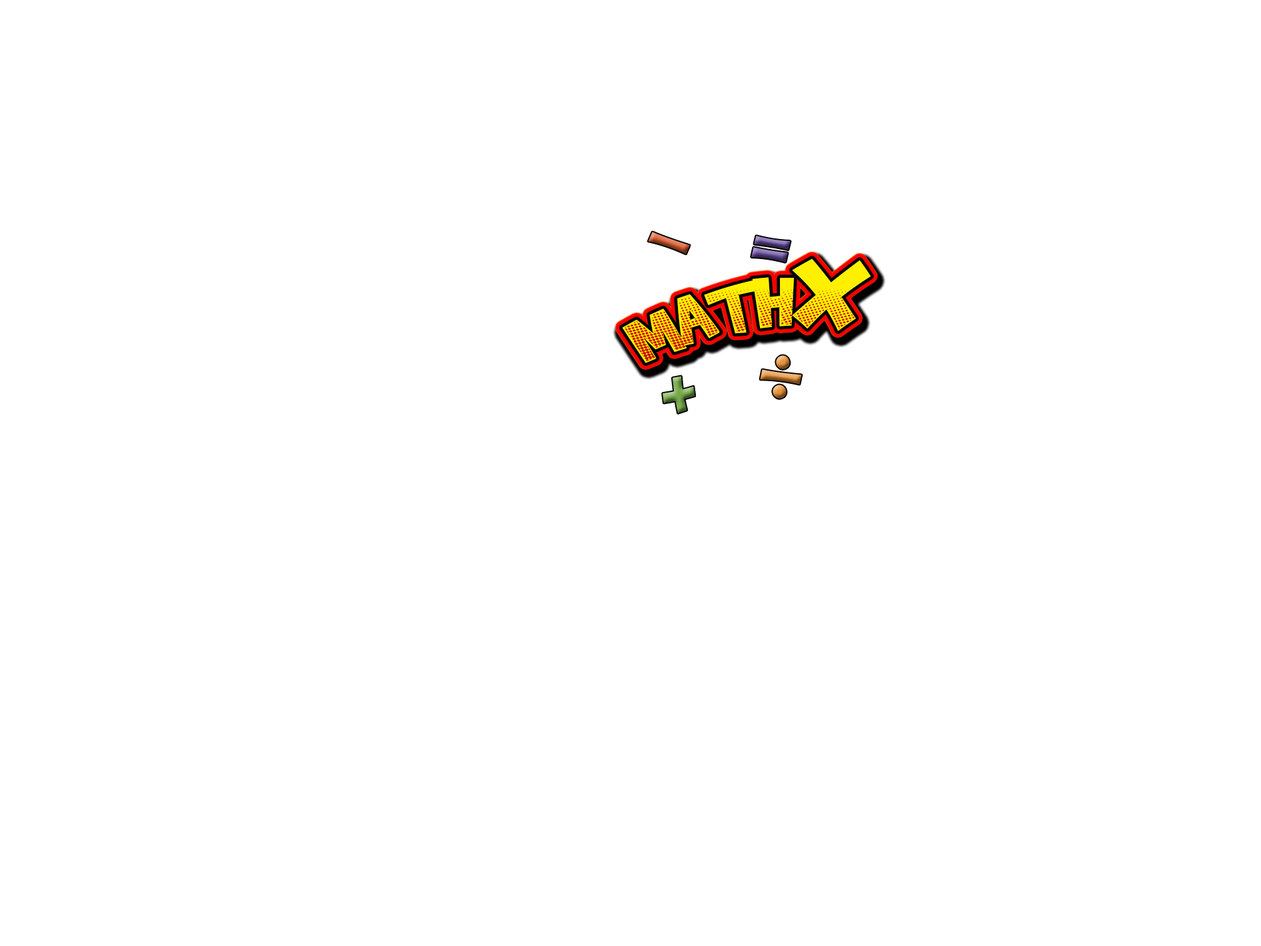
<style>
.page{position:relative;width:1261px;height:946px;background:#ffffff}
.page>*{position:absolute;margin:0}
.t1{font:93px "BradyBunchRemastered";letter-spacing:-0.02em}
.t2{font:83.4px "BradyBunchRemastered";letter-spacing:-0.02em}
.t3{font:116.8px "BradyBunchRemastered";letter-spacing:-0.02em}
</style>
<div class="page">
<p class="t1" style="left:648px;top:232px;width:42px;height:22px;rotate:21deg">-</p>
<p class="t1" style="left:751px;top:236px;width:40px;height:26px;rotate:11deg">=</p>
<p class="t2" style="left:622px;top:258px;width:249px;height:105px;rotate:-11deg">MATH<span class="t3">X</span></p>
<p class="t1" style="left:776px;top:355px;width:14px;height:14px;rotate:9deg">.</p>
<p class="t1" style="left:663px;top:376px;width:32px;height:37px;rotate:-8deg">+</p>
<p class="t1" style="left:760px;top:369px;width:42px;height:15px;rotate:9deg">-</p>
<p class="t1" style="left:773px;top:384px;width:14px;height:14px;rotate:9deg">.</p>
</div>
